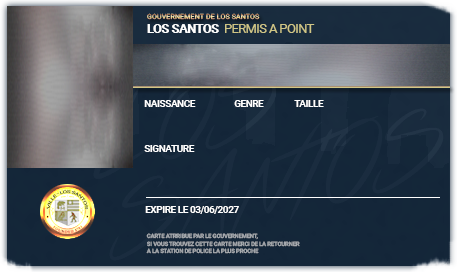
<style>
.page{position:relative;width:457px;height:272px}
.page>*{position:absolute;margin:0}
.t1{font:7px "Roboto-Regular";letter-spacing:0.025em}
.t2{font:12.6px "Roboto-Regular";letter-spacing:-0.035em;color:#d0c686}
.t3{font:12.6px "Roboto-Black";letter-spacing:-0.035em;color:#ffffff}
.t4{font:9.8px "Roboto-Bold";letter-spacing:-0.035em;color:#ffffff}
.t5{font:3.9px "Roboto-Regular";letter-spacing:-0.035em}
.t6{font:6px "Roboto-Bold";letter-spacing:-0.035em;color:#a7aaaf}
</style>
<div class="page">
<p class="t1" style="left:147px;top:13px;width:113px;height:7px">GOUVERNEMENT DE LOS SANTOS</p>
<p class="t2" style="left:147px;top:24px;width:168px;height:9px"><span class="t3">LOS SANTOS  </span>PERMIS A POINT</p>
<p class="t4" style="left:144px;top:100px;width:52px;height:7px">NAISSANCE</p>
<p class="t4" style="left:234px;top:100px;width:30px;height:7px">GENRE</p>
<p class="t4" style="left:294px;top:100px;width:30px;height:7px">TAILLE</p>
<p class="t4" style="left:144px;top:145px;width:51px;height:7px">SIGNATURE</p>
<p class="t5" style="left:46px;top:190px;width:42px;height:20px">VILLE - LOS SANTOS</p>
<p class="t4" style="left:145px;top:206px;width:94px;height:8px">EXPIRE LE 03/06/2027</p>
<p class="t6" style="left:146px;top:233px;width:154px;height:21px">CARTE ATRRIBUE PAR LE GOUVERNEMENT, <br>SI VOUS TROUVEZ CETTE CARTE MERCI DE LA RETOURNER <br>A LA STATION DE POLICE LA PLUS PROCHE</p>
</div>
